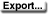
<style>
.page{position:relative;width:49px;height:14px;background:#ffffff}
.page>*{position:absolute;margin:0}
.t1{font:10px "Helvetica-Bold";color:#000000}
</style>
<div class="page">
<p class="t1" style="left:3px;top:1px;width:39px;height:10px">Export...</p>
</div>
